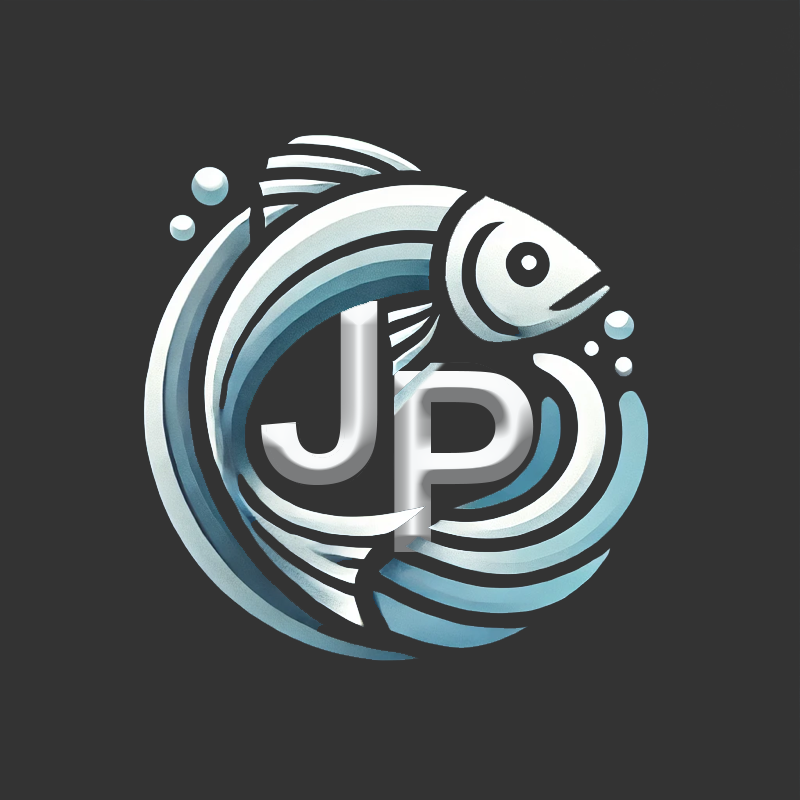
<style>
.page{position:relative;width:800px;height:800px;background:#333333}
.page>*{position:absolute;margin:0}
.t1{font:253px "Arial-BoldMT"}
</style>
<div class="page">
<p class="t1" style="left:261px;top:301px;width:117px;height:184px">J</p>
<p class="t1" style="left:394px;top:371px;width:140px;height:181px">P</p>
</div>
